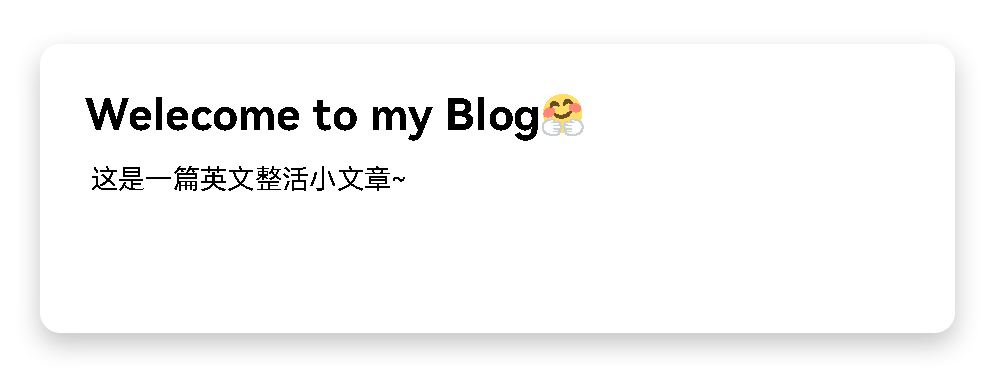
<style>
.page{position:relative;width:1000px;height:374px;background:#ffffff}
.page>*{position:absolute;margin:0}
.t1{font:43.7px "HarmonyOS_Sans_SC_Bold";color:#000000}
.t2{font:43.7px "EmojiOneColor";color:#000000}
.t3{font:27.3px "HarmonyOS_Sans_SC";color:#000000}
</style>
<div class="page">
<p class="t1" style="left:85px;top:94px;width:499px;height:47px">Welecome to my Blog<span class="t2">🤗</span></p>
<p class="t3" style="left:92px;top:166px;width:313px;height:25px">这是一篇英文整活小文章~</p>
</div>
